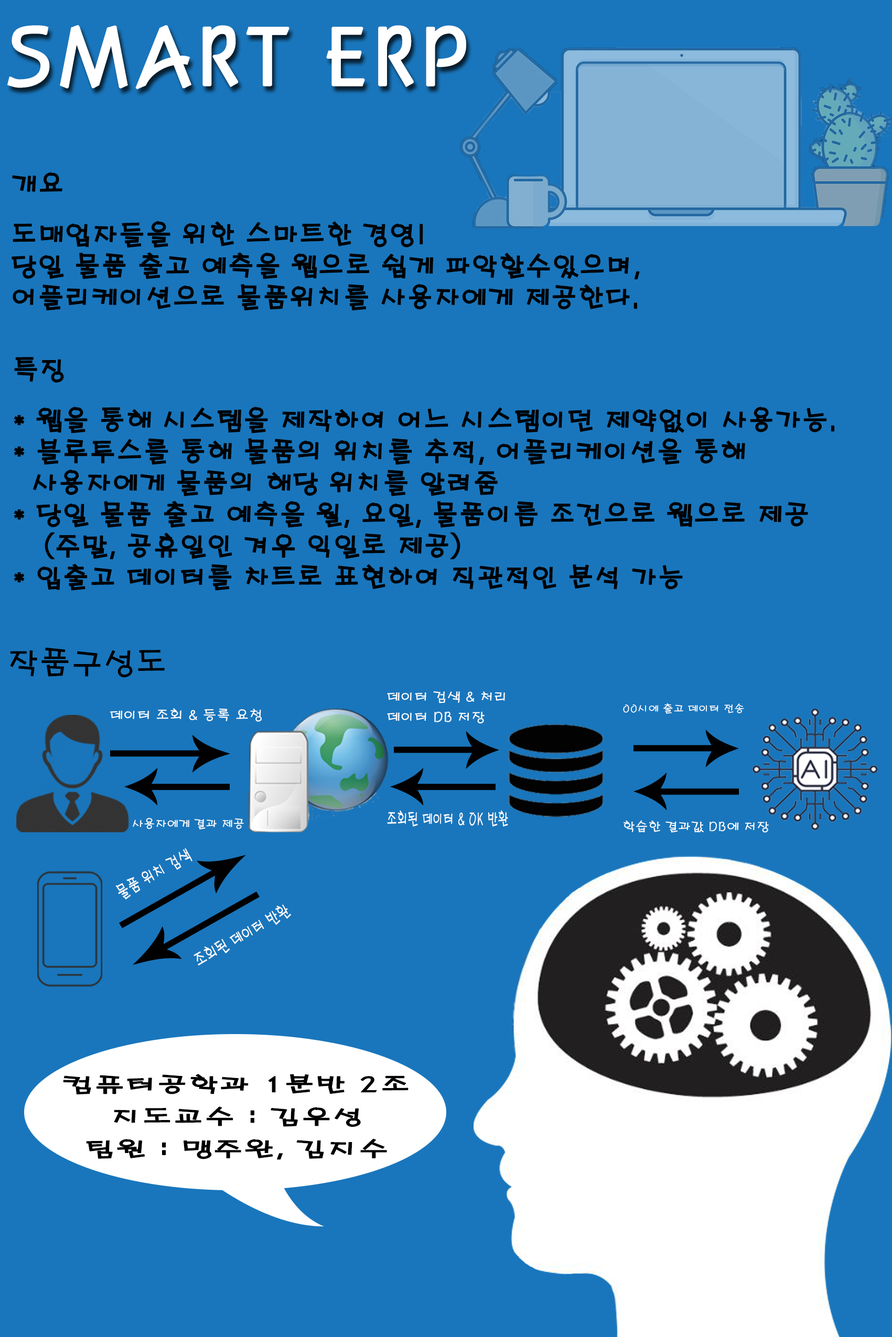
<style>
.page{position:relative;width:892px;height:1337px;background:#1976bc}
.page>*{position:absolute;margin:0}
.t1{font:78.6px "H2porM";color:#ffffff;font-weight:bold}
.t2{font:26.2px/31.5px "H2porM";color:#000000;font-weight:bold}
.t3{font:26.2px/25.2px "H2porM";color:#000000;font-weight:bold}
.t4{font:31.5px "H2porM";color:#000000}
.t5{font:13.7px "H2porM";color:#ffffff}
.t6{font:10.5px "H2porM";color:#ffffff}
.t7{font:11.9px "H2porM";color:#ffffff}
.t8{font:17.4px "H2porM";color:#ffffff;scale:0.61 1}
.t9{font:12.6px "H2porM";color:#ffffff}
.t10{font:17.4px "H2porM";color:#ffffff;scale:0.71 1}
.t11{font:21px/16.1px "H2porM";color:#000000;font-weight:bold;scale:1.45 1}
</style>
<div class="page">
<p class="t1" style="left:7px;top:25px;width:459px;height:65px">SMART ERP</p>
<p class="t2" style="left:12px;top:172px;width:628px;height:139px"><span class="t3">개요<br><br></span>도매업자들을 위한 스마트한 경영!<br>당일 물품 출고 예측을 웹으로 쉽게 파악할수있으며, <br>어플리케이션으로 물품위치를 사용자에게 제공한다.</p>
<p class="t2" style="left:14px;top:357px;width:820px;height:234px"><span class="t3">특징<br><br></span>* 웹을 통해 시스템을 제작하여 어느 시스템이던 제약없이 사용가능.<br>* 블루투스를 통해 물품의 위치를 추적, 어플리케이션을 통해<br>  사용자에게 물품의 해당 위치를 알려줌<br>* 당일 물품 출고 예측을 월, 요일, 물품이름 조건으로 웹으로 제공<br>   (주말, 공휴일인 겨우 익일로 제공)<br>* 입출고 데이터를 차트로 표현하여 직관적인 분석 가능</p>
<p class="t4" style="left:10px;top:647px;width:155px;height:31px">작품구성도</p>
<p class="t5" style="left:387px;top:691px;width:118px;height:12px">데이터 검색 &amp; 처리</p>
<p class="t5" style="left:110px;top:708px;width:152px;height:14px">데이터 조회 &amp; 등록 요청</p>
<p class="t5" style="left:387px;top:711px;width:97px;height:13px">데이터 DB 저장</p>
<p class="t6" style="left:623px;top:703px;width:121px;height:11px">00시에 출고 데이터 전송</p>
<p class="t7" style="left:133px;top:818px;width:111px;height:12px">사용자에게 결과 제공</p>
<p class="t8" style="left:387px;top:810px;width:121px;height:17px">조회된 데이터 &amp; OK 반환</p>
<p class="t9" style="left:623px;top:820px;width:145px;height:13px">학습한 결과값 DB에 저장</p>
<p class="t10" style="left:115px;top:848px;width:77px;height:52px;rotate:-29deg">물품 위치 검색</p>
<p class="t10" style="left:193px;top:905px;width:98px;height:61px;rotate:-29deg">조회된 데이터 반환</p>
<p class="t11" style="left:63px;top:1074px;width:345px;height:86px;text-align:center">컴퓨터공학과 1분반 2조<br><br>지도교수 : 김우성<br><br>팀원 : 맹주완, 김지수</p>
</div>
